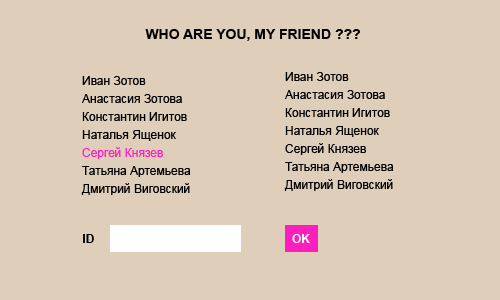
<style>
.page{position:relative;width:500px;height:300px;background:#dfceba}
.page>*{position:absolute;margin:0}
.t1{font:14px "Arial-BoldMT";color:#000000}
.t2{font:12px/18px "ArialMT";color:#000000}
.t3{font:12px/18px "ArialMT";color:#fc1fbe}
.t4{font:12px "Arial-BoldMT";color:#000000}
.t5{font:12px "Arial-BoldMT";color:#ffffff}
</style>
<div class="page">
<p class="t1" style="left:145px;top:29px;width:215px;height:12px">WHO ARE YOU, MY FRIEND ???</p>
<p class="t2" style="left:81px;top:76px;width:110px;height:119px">Иван Зотов<br>Анастасия Зотова<br>Константин Игитов<br>Наталья Ященок<br><span class="t3">Сергей Князев<br></span>Татьяна Артемьева<br>Дмитрий Виговский</p>
<p class="t2" style="left:284px;top:72px;width:110px;height:119px">Иван Зотов<br>Анастасия Зотова<br>Константин Игитов<br>Наталья Ященок<br>Сергей Князев<br>Татьяна Артемьева<br>Дмитрий Виговский</p>
<p class="t4" style="left:83px;top:234px;width:11px;height:9px">ID</p>
<p class="t5" style="left:292px;top:234px;width:18px;height:9px">OK</p>
</div>
